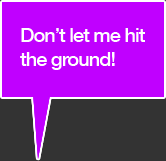
<style>
.page{position:relative;width:166px;height:161px;background:#c000ff}
.page>*{position:absolute;margin:0}
.t1{font:20px "HelveticaNeue-Medium";letter-spacing:-0.05em;color:#ffffff}
</style>
<div class="page">
<p class="t1" style="left:20px;top:28px;width:125px;height:42px">Don’t let me hit<br>the ground!</p>
</div>
